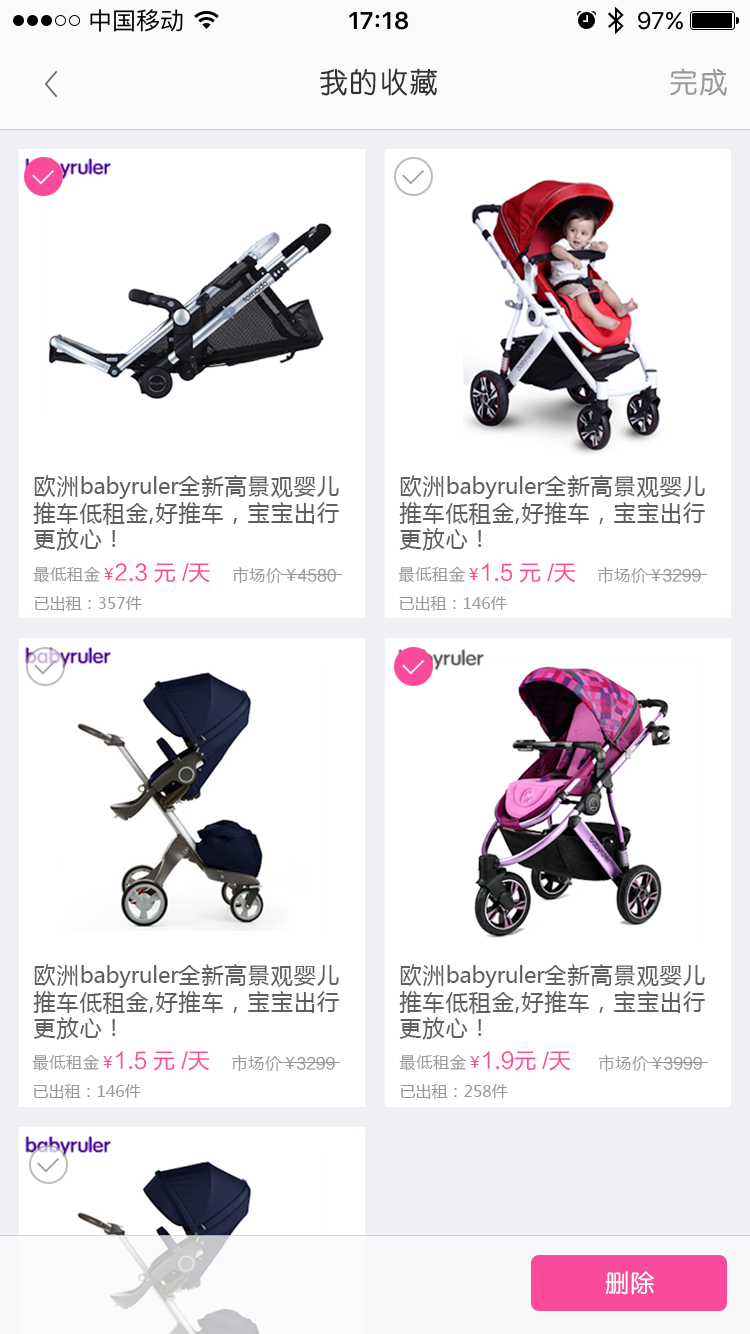
<style>
.page{position:relative;width:750px;height:1334px;background:#ffffff}
.page>*{position:absolute;margin:0}
.t1{font:28px "STYuanti-SC-Regular";letter-spacing:0.075em;color:#333333}
.t2{font:28px "STYuanti-SC-Regular";letter-spacing:0.075em;color:#999999}
.t3{font:22px "MicrosoftYaHei";letter-spacing:0.05em;color:#5f5f5f}
.t4{font:22px "MicrosoftYaHei";letter-spacing:-0.01em;color:#5f5f5f}
.t5{font:16px "MicrosoftYaHei";letter-spacing:0.05em;color:#999999}
.t6{font:16px "MicrosoftYaHei";letter-spacing:0.05em;color:#fa4b9b}
.t7{font:22px "FZLTHK_ZJRB--GBK1-0";color:#fa4b9b}
.t8{font:16px "FZLTHK_ZJRB--GBK1-0";color:#999999}
.t9{font:16px "MicrosoftYaHei";color:#999999}
.t10{font:24px "STYuanti-SC-Regular";letter-spacing:0.05em;color:#fefefe}
</style>
<div class="page">
<p class="t1" style="left:320px;top:68px;width:118px;height:28px">我的收藏</p>
<p class="t2" style="left:670px;top:68px;width:57px;height:28px">完成</p>
<p class="t3" style="left:33px;top:475px;width:306px;height:76px">欧洲<span class="t4">babyruler</span>全新高景观婴儿推车低租金,好推车，宝宝出行更放心！</p>
<p class="t3" style="left:399px;top:475px;width:306px;height:76px">欧洲<span class="t4">babyruler</span>全新高景观婴儿推车低租金,好推车，宝宝出行更放心！</p>
<p class="t5" style="left:33px;top:566px;width:81px;height:17px">最低租金<span class="t6">￥</span></p>
<p class="t7" style="left:115px;top:563px;width:95px;height:20px">2.3 元 /天</p>
<p class="t5" style="left:232px;top:567px;width:64px;height:16px">市场价￥</p>
<p class="t8" style="left:297px;top:568px;width:39px;height:14px">4580</p>
<p class="t5" style="left:398px;top:566px;width:81px;height:17px">最低租金<span class="t6">￥</span></p>
<p class="t7" style="left:482px;top:563px;width:93px;height:20px">1.5 元 /天</p>
<p class="t5" style="left:597px;top:567px;width:64px;height:16px">市场价￥</p>
<p class="t8" style="left:663px;top:568px;width:38px;height:14px">3299</p>
<p class="t9" style="left:34px;top:596px;width:108px;height:15px">已出租：357件</p>
<p class="t9" style="left:399px;top:596px;width:108px;height:15px">已出租：146件</p>
<p class="t3" style="left:33px;top:964px;width:306px;height:76px">欧洲<span class="t4">babyruler</span>全新高景观婴儿推车低租金,好推车，宝宝出行更放心！</p>
<p class="t3" style="left:399px;top:964px;width:306px;height:76px">欧洲<span class="t4">babyruler</span>全新高景观婴儿推车低租金,好推车，宝宝出行更放心！</p>
<p class="t5" style="left:32px;top:1054px;width:81px;height:17px">最低租金<span class="t6">￥</span></p>
<p class="t7" style="left:116px;top:1051px;width:93px;height:20px">1.5 元 /天</p>
<p class="t5" style="left:231px;top:1055px;width:64px;height:16px">市场价￥</p>
<p class="t8" style="left:297px;top:1056px;width:38px;height:14px">3299</p>
<p class="t5" style="left:399px;top:1054px;width:81px;height:17px">最低租金<span class="t6">￥</span></p>
<p class="t7" style="left:483px;top:1051px;width:87px;height:20px">1.9元 /天</p>
<p class="t5" style="left:598px;top:1055px;width:64px;height:16px">市场价￥</p>
<p class="t8" style="left:664px;top:1056px;width:38px;height:14px">3999</p>
<p class="t9" style="left:33px;top:1084px;width:108px;height:15px">已出租：146件</p>
<p class="t9" style="left:400px;top:1084px;width:108px;height:15px">已出租：258件</p>
<p class="t10" style="left:605px;top:1271px;width:49px;height:24px">删除</p>
</div>
